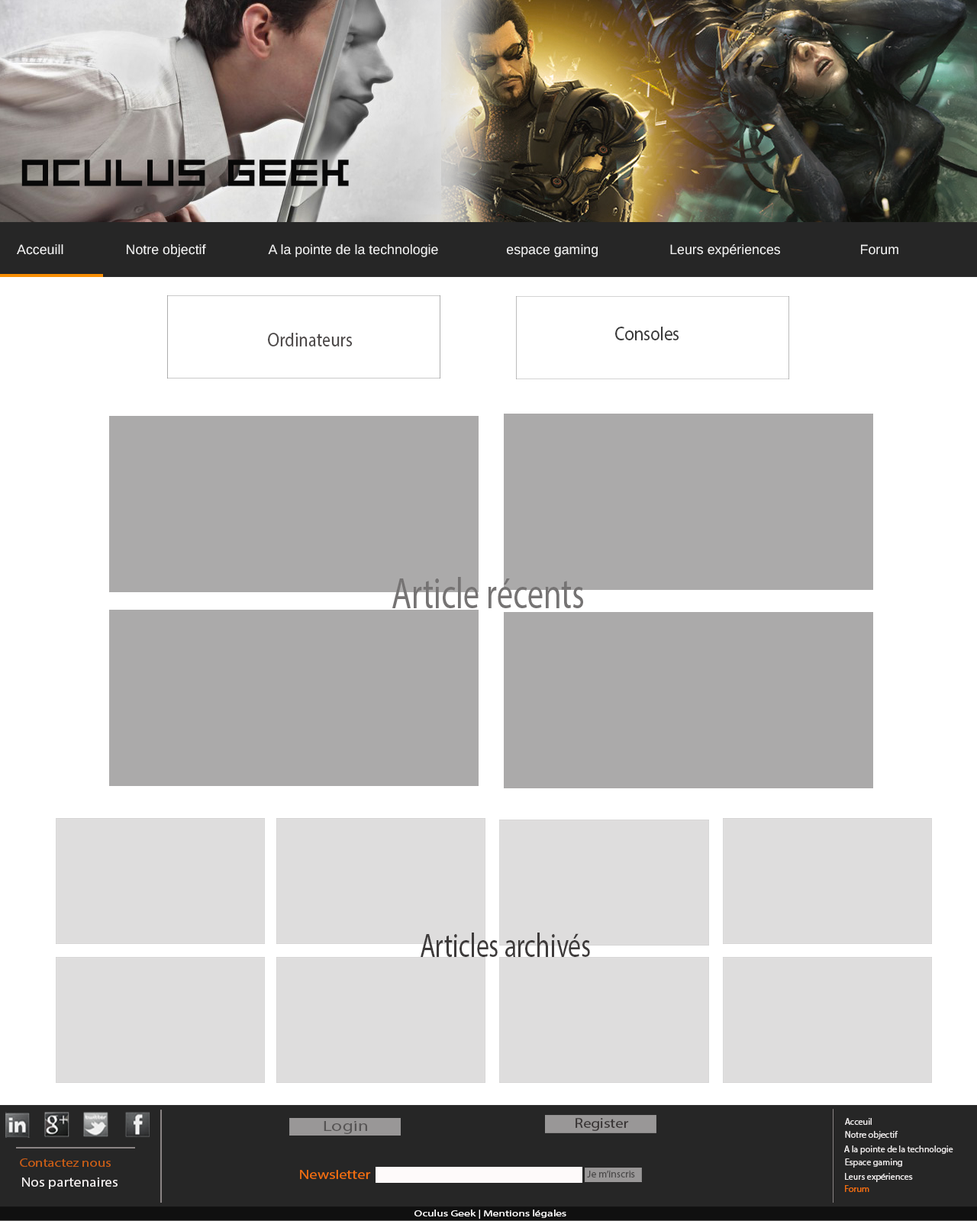
<style>
.page{position:relative;width:977px;height:1221px;background:#ffffff}
.page>*{position:absolute;margin:0}
.t1{font:36.6px "Bit-Trip7-(sRB)";color:#080808}
.t2{font:13.5px "Arimo";color:#f0f0f0}
.t3{font:19.5px "MyriadPro-Regular";color:#3a3a3a;scale:0.88 1}
.t4{font:19.5px "MyriadPro-Regular";color:#4e4a4a;scale:0.88 1}
.t5{font:43px "MyriadPro-Regular";color:#757373;scale:0.75 1}
.t6{font:33.5px "MyriadPro-Regular";color:#3e3b3b;scale:0.76 1}
.t7{font:14.6px "MyriadPro-Regular";color:#565353;scale:1.34 1}
.t8{font:13.9px "MyriadPro-Regular";color:#363232;scale:1.14 1}
.t9{font:9.2px "MyriadPro-Regular";color:#e8e5e5}
.t10{font:12.5px "MyriadPro-Regular";color:#c95e15;scale:1.13 1}
.t11{font:12.8px "MyriadPro-Regular";color:#f36f0e;scale:1.24 1}
.t12{font:13.2px "MyriadPro-Regular";color:#f4f0f0;scale:1.13 1}
.t13{font:10.2px "MyriadPro-Regular";color:#494848}
.t14{font:9.2px "MyriadPro-Regular";color:#ee6d0f}
.t15{font:8.7px "MyriadPro-Regular";color:#fffefe;scale:1.35 1}
</style>
<div class="page">
<p class="t1" style="left:21px;top:159px;width:328px;height:27px">OCULUS GEEK</p>
<p class="t2" style="left:17px;top:244px;width:881px;height:13px">Acceuill   Notre objectif     A la pointe de la technologie   espace gaming   Leurs expériences   Forum</p>
<p class="t3" style="left:615px;top:327px;width:64px;height:13px">Consoles</p>
<p class="t4" style="left:268px;top:333px;width:85px;height:13px">Ordinateurs</p>
<p class="t5" style="left:392px;top:577px;width:191px;height:31px">Article récents</p>
<p class="t6" style="left:420px;top:932px;width:170px;height:25px">Articles archivés</p>
<p class="t7" style="left:324px;top:1121px;width:43px;height:13px">Login</p>
<p class="t8" style="left:575px;top:1118px;width:54px;height:13px">Register</p>
<p class="t9" style="left:845px;top:1118px;width:26px;height:7px">Acceuil</p>
<p class="t9" style="left:845px;top:1131px;width:53px;height:8px">Notre objectif</p>
<p class="t9" style="left:844px;top:1145px;width:109px;height:9px">A la pointe de la technologie</p>
<p class="t10" style="left:20px;top:1158px;width:91px;height:9px">Contactez nous</p>
<p class="t11" style="left:300px;top:1170px;width:71px;height:9px">Newsletter</p>
<p class="t9" style="left:845px;top:1158px;width:57px;height:9px">Espace gaming</p>
<p class="t12" style="left:22px;top:1177px;width:96px;height:12px">Nos partenaires</p>
<p class="t13" style="left:587px;top:1171px;width:48px;height:6px">Je m’inscris</p>
<p class="t9" style="left:845px;top:1173px;width:68px;height:9px">Leurs expériences</p>
<p class="t14" style="left:845px;top:1185px;width:24px;height:7px">Forum</p>
<p class="t15" style="left:414px;top:1209px;width:152px;height:10px">Oculus Geek | Mentions légales</p>
</div>
